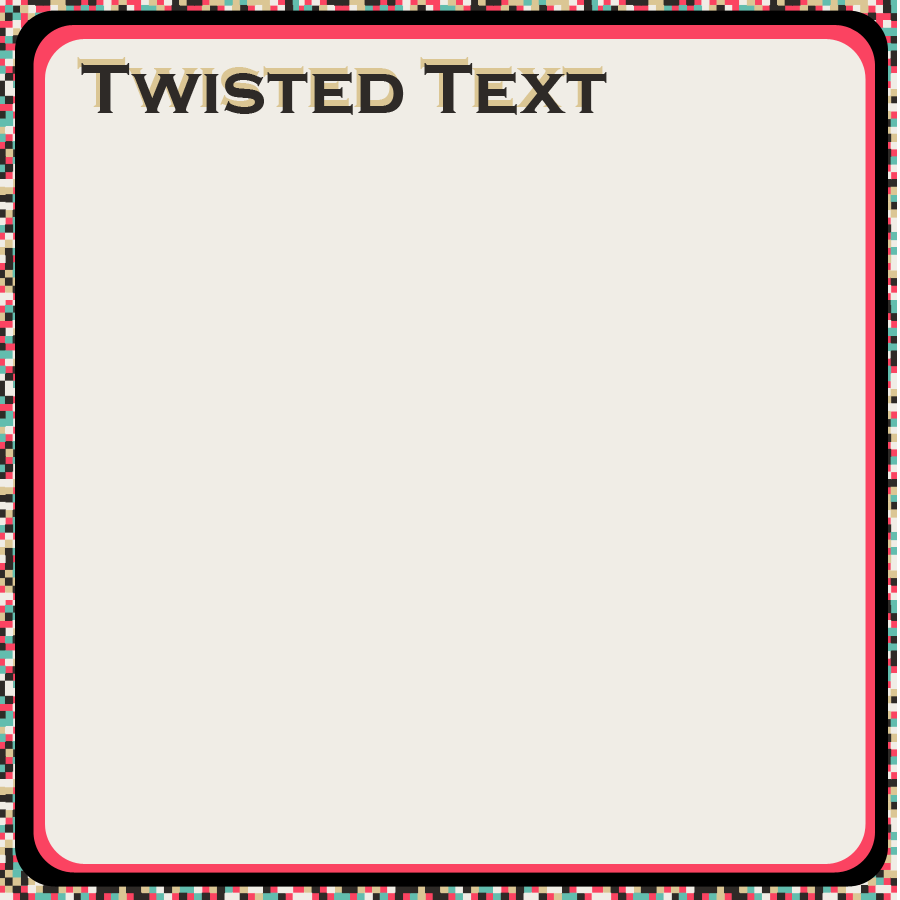
<style>
.page{position:relative;width:900px;height:900px;background:#f0ede6}
.page>*{position:absolute;margin:0}
.t1{font:72px "CopperplateGothic-Bold"}
.t2{font:72px "CopperplateGothic-Bold";color:#2e2a27}
</style>
<div class="page">
<p class="t1" style="left:77px;top:57px;width:526px;height:52px">Twisted Text</p>
<p class="t2" style="left:81px;top:63px;width:526px;height:52px">Twisted Text</p>
</div>
